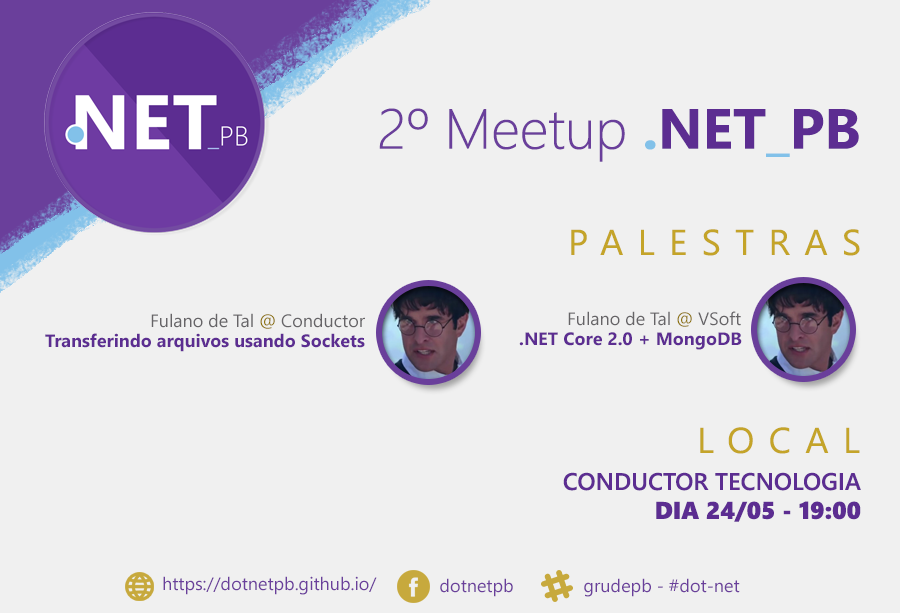
<style>
.page{position:relative;width:900px;height:613px;background:#f0f0f0}
.page>*{position:absolute;margin:0}
.t1{font:56.5px "SegoeUI-Light";color:#6a3f9b}
.t2{font:56.5px "SegoeUI-Bold";color:#82c1e9}
.t3{font:56.5px "SegoeUI-Bold";color:#5c2d91}
.t4{font:36px "SegoeUI";letter-spacing:0.4em;color:#c4a429}
.t5{font:18px "SegoeUI";color:#666467}
.t6{font:18px "SegoeUI";color:#8f7510}
.t7{font:18px "SegoeUI-Bold";color:#5c2d91}
.t8{font:24px "SegoeUI-Semibold";color:#5c2d91}
.t9{font:24px "SegoeUIBlack";color:#5c2d91}
.t10{font:18px "SegoeUI";color:#6a3f9b}
</style>
<div class="page">
<p class="t1" style="left:379px;top:108px;width:480px;height:54px">2º Meetup <span class="t2">.</span><span class="t3">NET</span><span class="t2">_</span><span class="t3">PB</span></p>
<p class="t4" style="left:571px;top:229px;width:289px;height:27px">PALESTRAS</p>
<p class="t5" style="left:151px;top:313px;width:214px;height:16px">Fulano de Tal <span class="t6">@ </span>Conductor</p>
<p class="t5" style="left:568px;top:311px;width:173px;height:16px">Fulano de Tal <span class="t6">@ </span>VSoft</p>
<p class="t7" style="left:45px;top:333px;width:320px;height:19px">Transferindo arquivos usando Sockets</p>
<p class="t7" style="left:519px;top:332px;width:223px;height:18px">.NET Core 2.0 + MongoDB</p>
<p class="t4" style="left:700px;top:427px;width:160px;height:27px">LOCAL</p>
<p class="t8" style="left:563px;top:472px;width:298px;height:50px;text-align:right">CONDUCTOR TECNOLOGIA<br><span class="t9">DIA 24/05 - 19:00</span></p>
<p class="t10" style="left:163px;top:576px;width:214px;height:19px">https://dotnetpb.github.io/</p>
<p class="t10" style="left:440px;top:578px;width:73px;height:19px">dotnetpb</p>
<p class="t10" style="left:584px;top:578px;width:156px;height:19px">grudepb - #dot-net</p>
</div>
